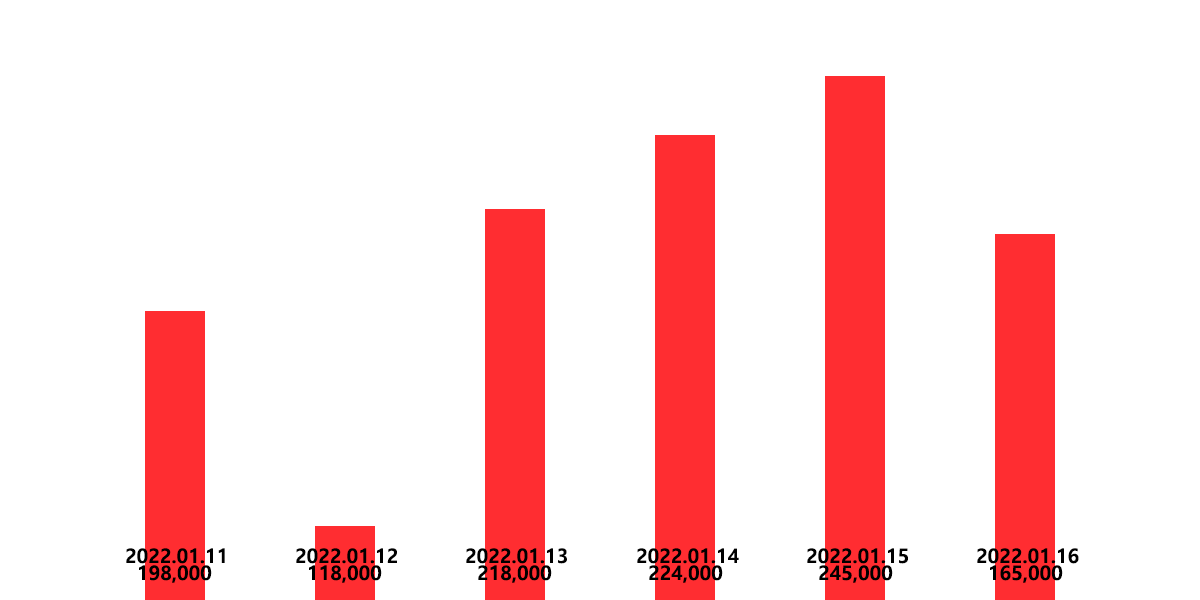
<style>
.page{position:relative;width:1200px;height:600px;background:#ffffff}
.page>*{position:absolute;margin:0}
.t1{font:20px "MalgunGothicBold";color:#000000}
</style>
<div class="page">
<p class="t1" style="left:126px;top:548px;width:99px;height:16px">2022.01.11</p>
<p class="t1" style="left:296px;top:548px;width:101px;height:16px">2022.01.12</p>
<p class="t1" style="left:466px;top:548px;width:101px;height:16px">2022.01.13</p>
<p class="t1" style="left:637px;top:548px;width:102px;height:16px">2022.01.14</p>
<p class="t1" style="left:807px;top:548px;width:101px;height:16px">2022.01.15</p>
<p class="t1" style="left:977px;top:548px;width:102px;height:16px">2022.01.16</p>
<p class="t1" style="left:139px;top:565px;width:73px;height:18px">198,000</p>
<p class="t1" style="left:309px;top:565px;width:73px;height:18px">118,000</p>
<p class="t1" style="left:478px;top:565px;width:74px;height:18px">218,000</p>
<p class="t1" style="left:649px;top:565px;width:74px;height:18px">224,000</p>
<p class="t1" style="left:819px;top:565px;width:74px;height:18px">245,000</p>
<p class="t1" style="left:990px;top:565px;width:73px;height:18px">165,000</p>
</div>
